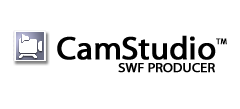
<style>
.page{position:relative;width:240px;height:109px;background:#ffffff}
.page>*{position:absolute;margin:0}
.t1{font:32.4px "MyriadWebPro";letter-spacing:-0.01em;color:#000000;font-weight:bold}
.t2{font:8.1px "MyriadWebPro";letter-spacing:-0.01em;color:#000000;font-weight:bold}
.t3{font:13.5px "MyriadWebPro";letter-spacing:-0.01em;color:#000000;font-weight:bold}
</style>
<div class="page">
<p class="t1" style="left:57px;top:35px;width:159px;height:25px">CamStudio</p>
<p class="t2" style="left:216px;top:38px;width:11px;height:7px">TM</p>
<p class="t3" style="left:118px;top:63px;width:97px;height:10px">SWF PRODUCER</p>
</div>
